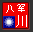
<style>
.page{position:relative;width:33px;height:32px;background:#f20000}
.page>*{position:absolute;margin:0}
.t1{font:10.4px "SimSun";color:#ffffff}
.t2{font:11.7px "SimSun";color:#ffffff}
</style>
<div class="page">
<p class="t1" style="left:6px;top:4px;width:19px;height:9px">八军</p>
<p class="t2" style="left:16px;top:15px;width:11px;height:12px">川</p>
</div>
